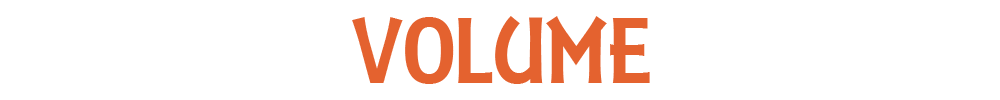
<style>
.page{position:relative;width:1000px;height:100px;background:#ffffff}
.page>*{position:absolute;margin:0}
.t1{font:100px "ARESSENCE";color:#e4622f}
</style>
<div class="page">
<p class="t1" style="left:352px;top:16px;width:298px;height:68px">VOLUME</p>
</div>
